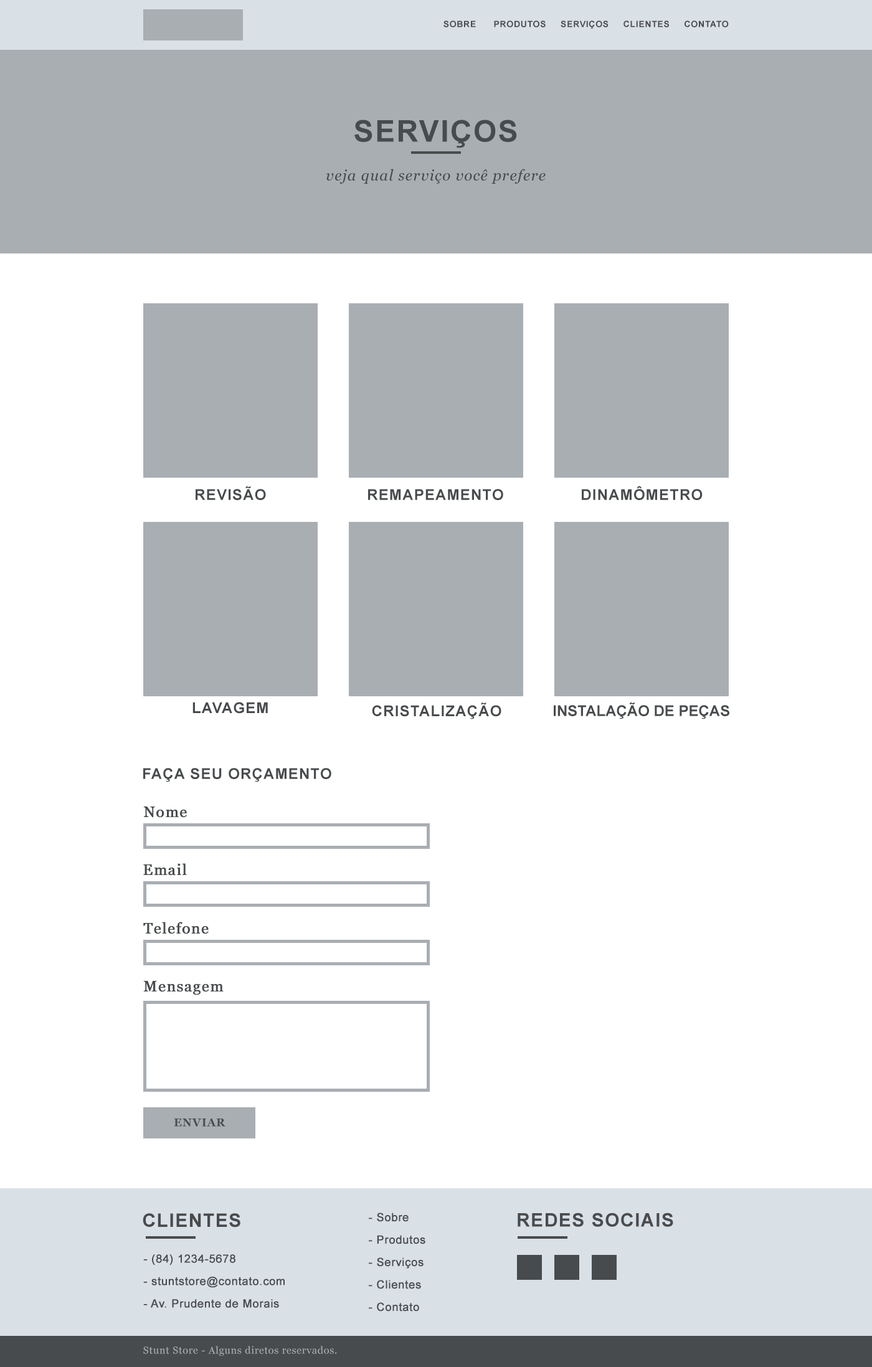
<style>
.page{position:relative;width:872px;height:1367px;background:#ffffff}
.page>*{position:absolute;margin:0}
.t1{font:8.7px "Arial-BoldMT";letter-spacing:0.05em;color:#484b4d;text-transform:uppercase}
.t2{font:29.9px "Arial-BoldMT";letter-spacing:0.05em;color:#484b4d;text-transform:uppercase}
.t3{font:15px "Georgia-Italic";letter-spacing:0.05em;color:#484b4d}
.t4{font:15px "Arial-BoldMT";letter-spacing:0.05em;color:#484b4d;text-transform:uppercase}
.t5{font:15px "Arial-BoldMT";color:#484b4d;text-transform:uppercase}
.t6{font:15px "Georgia";letter-spacing:0.05em;color:#484b4d;font-weight:bold}
.t7{font:11.2px "Georgia-Bold";letter-spacing:0.05em;color:#484b4d;text-transform:uppercase}
.t8{font:18.7px "Arial-BoldMT";letter-spacing:0.05em;color:#484b4d;text-transform:uppercase}
.t9{font:11.2px/22.4px "ArialMT";letter-spacing:0.025em;color:#484b4d;font-weight:bold}
.t10{font:10px "Georgia";letter-spacing:0.05em;color:#a9aeb3}
</style>
<div class="page">
<p class="t1" style="left:444px;top:21px;width:285px;height:8px">Sobre      produtos     serviços     Clientes     contato</p>
<p class="t2" style="left:354px;top:120px;width:163px;height:28px">serviços</p>
<p class="t3" style="left:326px;top:169px;width:220px;height:15px">veja qual serviço você prefere</p>
<p class="t4" style="left:582px;top:486px;width:121px;height:14px">Dinamômetro</p>
<p class="t4" style="left:196px;top:487px;width:70px;height:13px">Revisão</p>
<p class="t4" style="left:368px;top:489px;width:135px;height:11px">Remapeamento</p>
<p class="t4" style="left:192px;top:702px;width:76px;height:12px">Lavagem</p>
<p class="t4" style="left:372px;top:703px;width:129px;height:16px">cristalização</p>
<p class="t5" style="left:554px;top:703px;width:175px;height:16px">instalação de peças</p>
<p class="t4" style="left:143px;top:768px;width:188px;height:14px">Faça seu orçamento</p>
<p class="t6" style="left:143px;top:807px;width:44px;height:11px">Nome</p>
<p class="t6" style="left:143px;top:863px;width:44px;height:13px">Email</p>
<p class="t6" style="left:143px;top:922px;width:66px;height:12px">Telefone</p>
<p class="t6" style="left:143px;top:981px;width:81px;height:14px">Mensagem</p>
<p class="t7" style="left:174px;top:1119px;width:51px;height:8px">Enviar</p>
<p class="t8" style="left:143px;top:1213px;width:97px;height:15px">Clientes</p>
<p class="t9" style="left:369px;top:1213px;width:56px;height:99px">- Sobre<br>- Produtos<br>- Serviços<br>- Clientes<br>- Contato</p>
<p class="t8" style="left:518px;top:1213px;width:155px;height:14px">Redes Sociais</p>
<p class="t9" style="left:143px;top:1255px;width:142px;height:53px">- (84) 1234-5678<br>- stuntstore@contato.com<br>- Av. Prudente de Morais</p>
<p class="t10" style="left:143px;top:1346px;width:194px;height:10px">Stunt Store - Alguns diretos reservados.</p>
</div>
